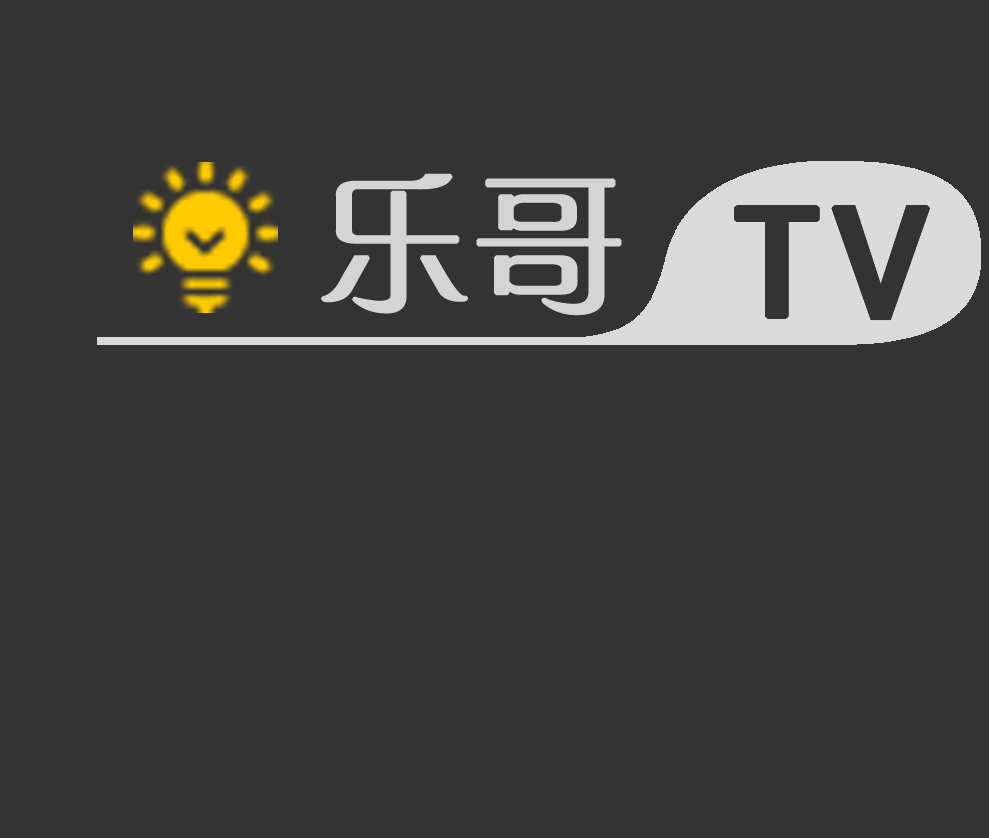
<style>
.page{position:relative;width:989px;height:838px;background:#333333}
.page>*{position:absolute;margin:0}
.t1{font:150px "FZZQJW--GB1-0";color:#d5d4d5;font-weight:bold}
</style>
<div class="page">
<p class="t1" style="left:321px;top:173px;width:301px;height:143px">乐哥</p>
</div>
